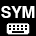
<style>
.page{position:relative;width:36px;height:36px;background:#000000}
.page>*{position:absolute;margin:0}
.t1{font:16px "Swiss721BT-Bold";color:#ffffff}
</style>
<div class="page">
<p class="t1" style="left:1px;top:6px;width:34px;height:12px">SYM</p>
</div>
